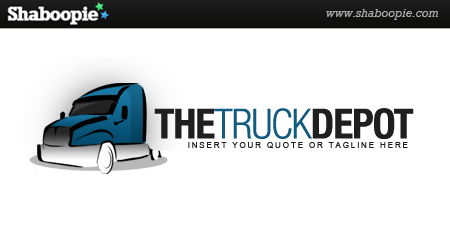
<style>
.page{position:relative;width:450px;height:250px;background:#ffffff}
.page>*{position:absolute;margin:0}
.t1{font:41.4px "HelveticaNeueLTStd-LtCn";letter-spacing:-0.025em;color:#115b7f}
.t2{font:41.4px "HelveticaNeueLTStd-BdCn";letter-spacing:-0.025em;color:#1f1f1f}
.t3{font:8.3px "ArialMT";letter-spacing:0.2em;color:#1f1f1f}
</style>
<div class="page">
<p class="t1" style="left:154px;top:108px;width:260px;height:31px"><span class="t2">THE</span>TRUCK<span class="t2">DEPOT</span></p>
<p class="t3" style="left:188px;top:142px;width:220px;height:7px">INSERT YOUR QUOTE OR TAGLINE HERE</p>
</div>
